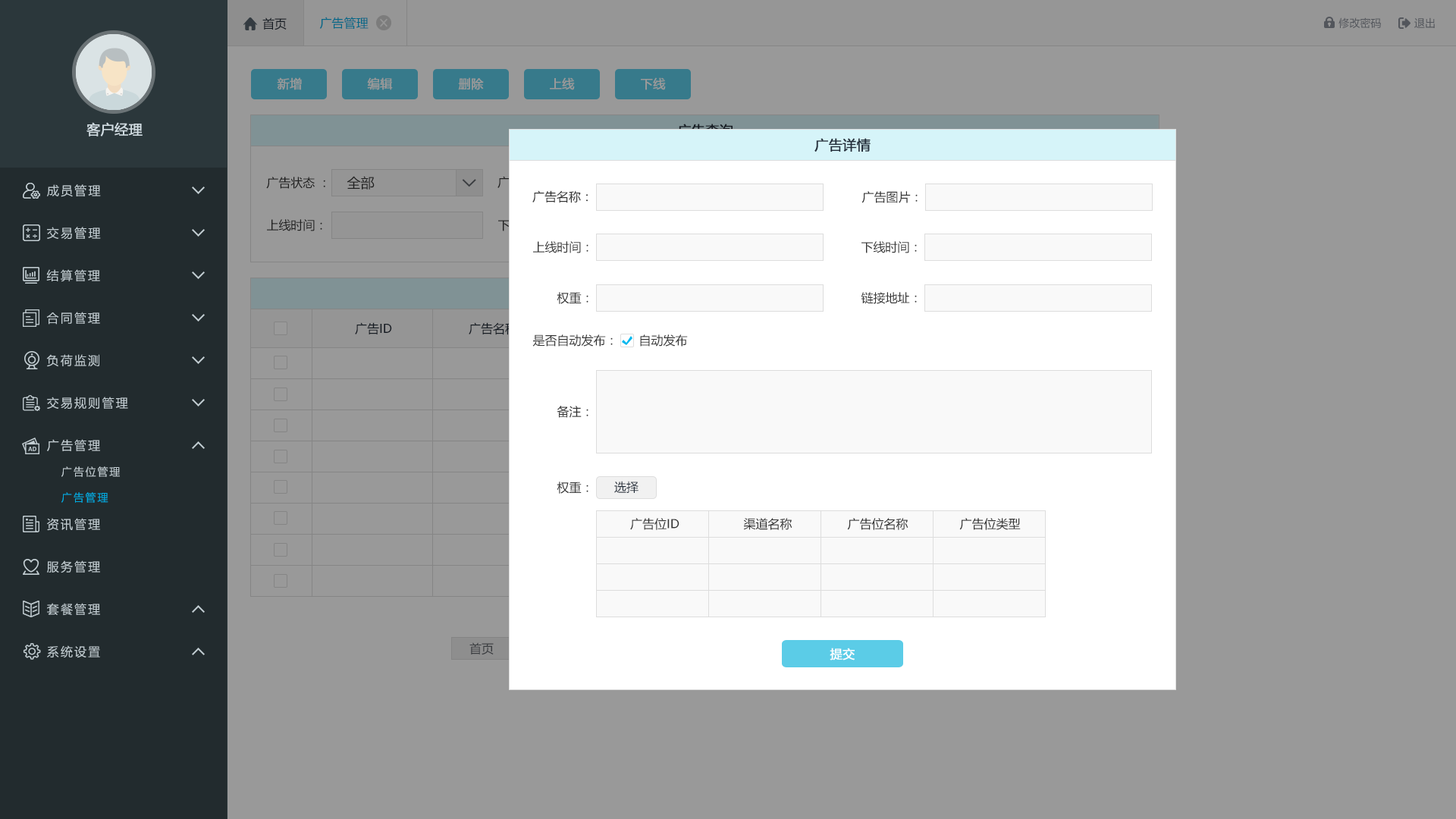
<style>
.page{position:relative;width:1456px;height:819px;background:#999999}
.page>*{position:absolute;margin:0}
.t1{font:12.1px "MicrosoftYaHei";color:#242e3b}
.t2{font:12.1px "MicrosoftYaHei";color:#006788}
.t3{font:10.6px "MicrosoftYaHei";color:#53565c}
.t4{font:12.1px "MicrosoftYaHei";color:#999999;font-weight:bold}
.t5{font:13.6px "MicrosoftYaHei";color:#d1dce2;font-weight:bold}
.t6{font:13.6px "MicrosoftYaHei";color:#242e3b;font-weight:bold}
.t7{font:12.1px "MicrosoftYaHei";letter-spacing:0.14em;color:#c2cdd2}
.t8{font:12.1px "MicrosoftYaHei";color:#333333}
.t9{font:13.6px "MicrosoftYaHei";color:#333333}
.t10{font:10.6px "MicrosoftYaHei";letter-spacing:0.14em;color:#c2cdd2}
.t11{font:10.6px "MicrosoftYaHei";letter-spacing:0.14em;color:#00ace2}
.t12{font:12.1px "MicrosoftYaHei";color:#3a3d40}
.t13{font:12.1px "MicrosoftYaHei";color:#ffffff;font-weight:bold}
</style>
<div class="page">
<p class="t1" style="left:262px;top:17px;width:25px;height:13px">首页</p>
<p class="t2" style="left:319px;top:17px;width:50px;height:12px">广告管理</p>
<p class="t3" style="left:1338px;top:17px;width:43px;height:12px">修改密码</p>
<p class="t3" style="left:1414px;top:17px;width:21px;height:11px">退出</p>
<p class="t4" style="left:277px;top:77px;width:25px;height:13px">新增</p>
<p class="t4" style="left:367px;top:77px;width:26px;height:13px">编辑</p>
<p class="t4" style="left:458px;top:77px;width:26px;height:13px">删除</p>
<p class="t4" style="left:550px;top:77px;width:25px;height:13px">上线</p>
<p class="t4" style="left:641px;top:77px;width:25px;height:13px">下线</p>
<p class="t5" style="left:86px;top:122px;width:57px;height:14px">客户经理</p>
<p class="t6" style="left:814px;top:138px;width:57px;height:14px">广告详情</p>
<p class="t7" style="left:47px;top:184px;width:54px;height:13px">成员管理</p>
<p class="t8" style="left:266px;top:177px;width:59px;height:12px">广告状态 ：</p>
<p class="t9" style="left:347px;top:176px;width:28px;height:14px">全部</p>
<p class="t8" style="left:532px;top:190px;width:56px;height:13px">广告名称：</p>
<p class="t8" style="left:861px;top:191px;width:57px;height:12px">广告图片：</p>
<p class="t8" style="left:267px;top:219px;width:55px;height:12px">上线时间：</p>
<p class="t7" style="left:47px;top:227px;width:54px;height:13px">交易管理</p>
<p class="t8" style="left:533px;top:241px;width:55px;height:12px">上线时间：</p>
<p class="t8" style="left:861px;top:241px;width:56px;height:12px">下线时间：</p>
<p class="t7" style="left:46px;top:269px;width:54px;height:13px">结算管理</p>
<p class="t8" style="left:557px;top:292px;width:31px;height:12px">权重：</p>
<p class="t8" style="left:861px;top:292px;width:56px;height:12px">链接地址：</p>
<p class="t7" style="left:46px;top:312px;width:54px;height:13px">合同管理</p>
<p class="t1" style="left:355px;top:322px;width:37px;height:12px">广告ID</p>
<p class="t1" style="left:469px;top:322px;width:48px;height:13px">广告名称</p>
<p class="t8" style="left:532px;top:334px;width:81px;height:13px">是否自动发布：</p>
<p class="t8" style="left:640px;top:334px;width:48px;height:13px">自动发布</p>
<p class="t7" style="left:46px;top:354px;width:53px;height:13px">负荷监测</p>
<p class="t7" style="left:47px;top:397px;width:81px;height:12px">交易规则管理</p>
<p class="t8" style="left:557px;top:406px;width:31px;height:12px">备注：</p>
<p class="t7" style="left:47px;top:439px;width:53px;height:12px">广告管理</p>
<p class="t10" style="left:61px;top:466px;width:59px;height:11px">广告位管理</p>
<p class="t8" style="left:557px;top:482px;width:31px;height:12px">权重：</p>
<p class="t1" style="left:614px;top:481px;width:25px;height:12px">选择</p>
<p class="t11" style="left:61px;top:492px;width:47px;height:11px">广告管理</p>
<p class="t7" style="left:47px;top:518px;width:53px;height:13px">资讯管理</p>
<p class="t8" style="left:630px;top:518px;width:49px;height:12px">广告位ID</p>
<p class="t8" style="left:743px;top:518px;width:49px;height:12px">渠道名称</p>
<p class="t8" style="left:847px;top:518px;width:61px;height:12px">广告位名称</p>
<p class="t8" style="left:959px;top:518px;width:62px;height:12px">广告位类型</p>
<p class="t7" style="left:47px;top:560px;width:53px;height:13px">服务管理</p>
<p class="t7" style="left:47px;top:603px;width:53px;height:13px">套餐管理</p>
<p class="t7" style="left:47px;top:645px;width:53px;height:13px">系统设置</p>
<p class="t12" style="left:469px;top:642px;width:25px;height:13px">首页</p>
<p class="t13" style="left:830px;top:648px;width:25px;height:12px">提交</p>
</div>
